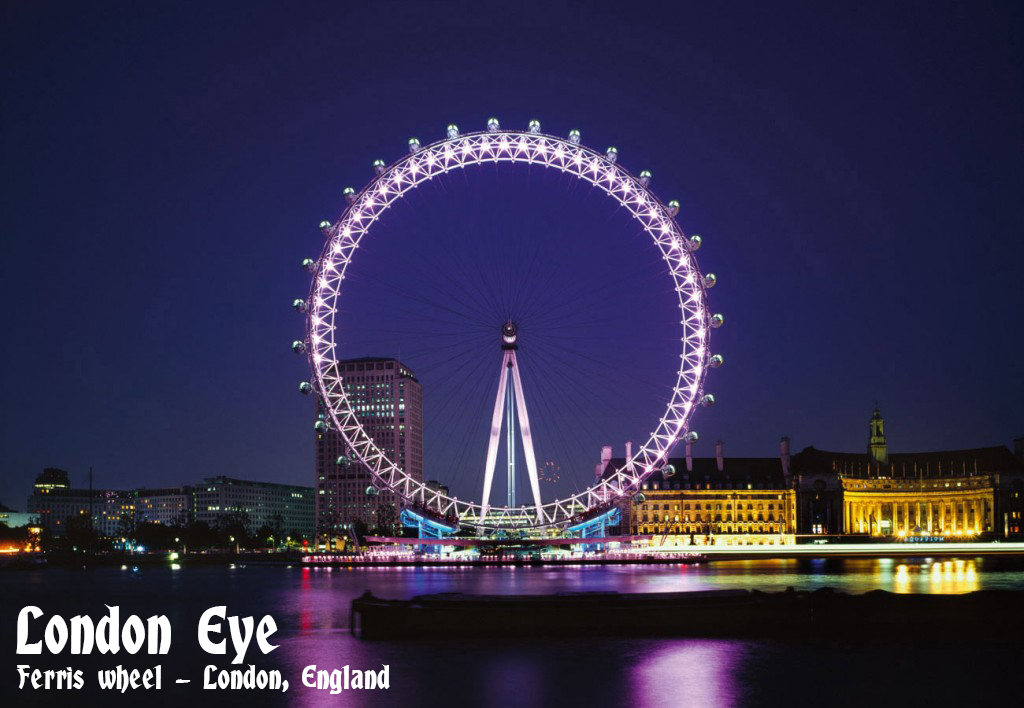
<style>
.page{position:relative;width:1024px;height:708px}
.page>*{position:absolute;margin:0}
.t1{font:60px "AlbertText-Bold";color:#ffffff}
.t2{font:30px "AlbertText-Bold";color:#ffffff}
</style>
<div class="page">
<p class="t1" style="left:16px;top:604px;width:265px;height:60px">London Eye</p>
<p class="t2" style="left:16px;top:664px;width:374px;height:30px">Ferris wheel - London, England</p>
</div>
